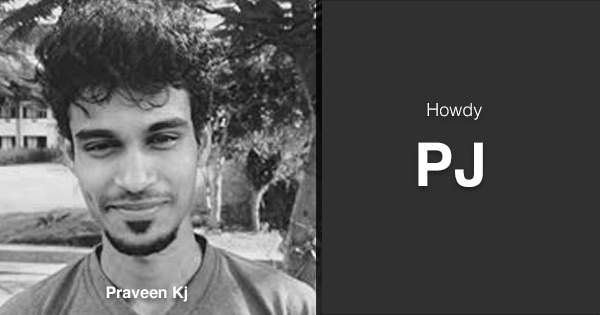
<style>
.page{position:relative;width:600px;height:315px;background:#303030}
.page>*{position:absolute;margin:0}
.t1{font:18px "Helvetica-Light";color:#ffffff}
.t2{font:60px "Helvetica-Bold";color:#ffffff}
.t3{font:16px "Helvetica-Bold";color:#ffffff}
</style>
<div class="page">
<p class="t1" style="left:427px;top:103px;width:55px;height:17px">Howdy</p>
<p class="t2" style="left:418px;top:142px;width:65px;height:45px">PJ</p>
<p class="t3" style="left:106px;top:286px;width:81px;height:16px">Praveen Kj</p>
</div>
